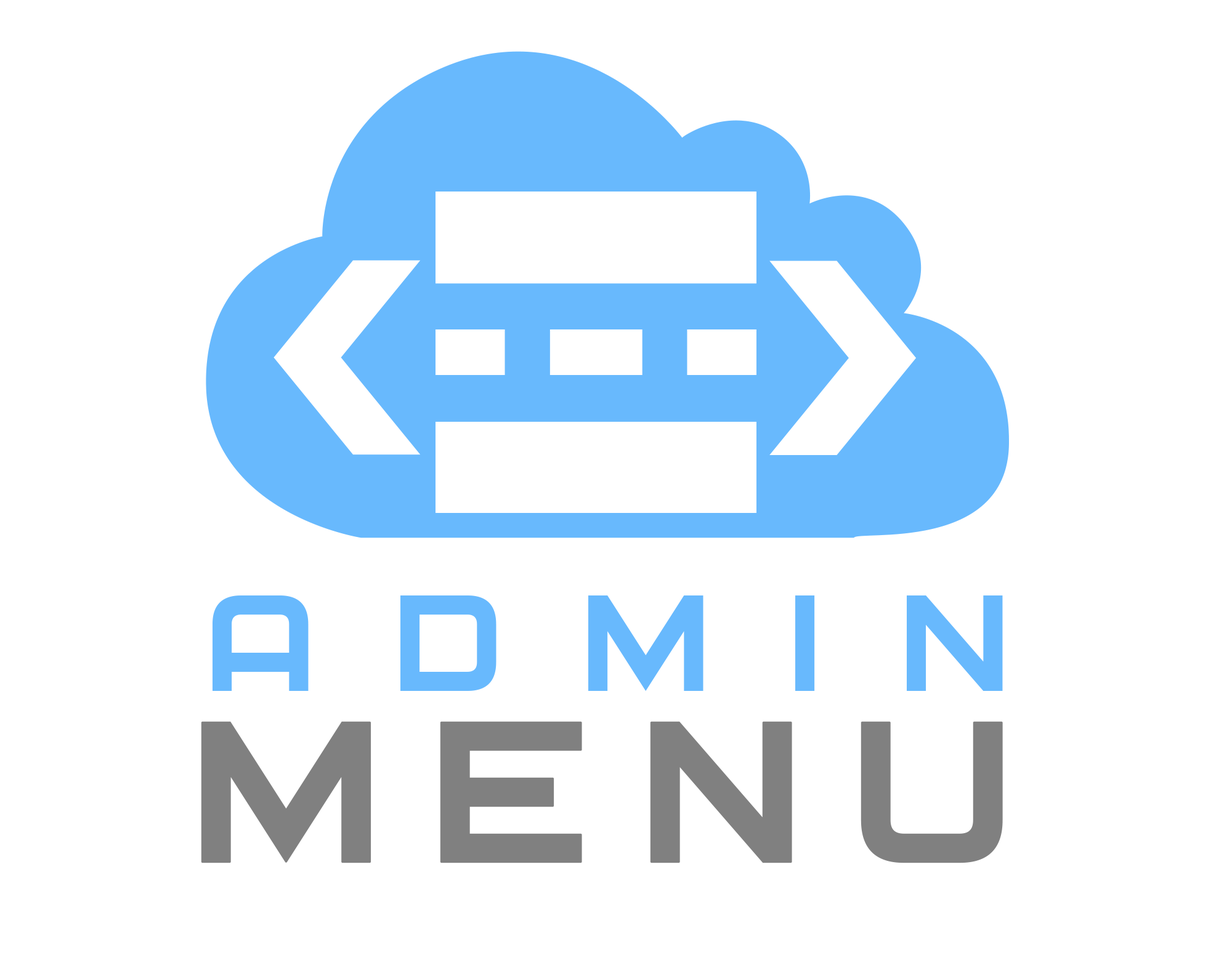
<style>
.page{position:relative;width:1232px;height:968px;background:#ffffff}
.page>*{position:absolute;margin:0}
.t1{font:159.5px/183.5px "Archangelsk";letter-spacing:0.517em;color:#68b9fd}
.t2{font:233.4px/171.2px "Archangelsk";letter-spacing:0.214em;color:#808080;font-weight:bold}
</style>
<div class="page">
<p class="t1" style="left:201px;top:596px;width:802px;height:267px;text-align:center">ADMIN<br><span class="t2">MENU</span></p>
</div>
